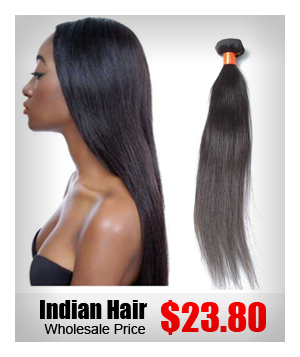
<style>
.page{position:relative;width:300px;height:357px;background:#ffffff}
.page>*{position:absolute;margin:0}
.t1{font:24px "Impact";color:#000000}
.t2{font:38px "Impact";color:#ff0000}
.t3{font:14px "ArialMT";color:#000000}
</style>
<div class="page">
<p class="t1" style="left:40px;top:300px;width:107px;height:19px">Indian Hair</p>
<p class="t2" style="left:161px;top:300px;width:105px;height:35px">$23.80</p>
<p class="t3" style="left:44px;top:324px;width:101px;height:10px">Wholesale Price</p>
</div>
